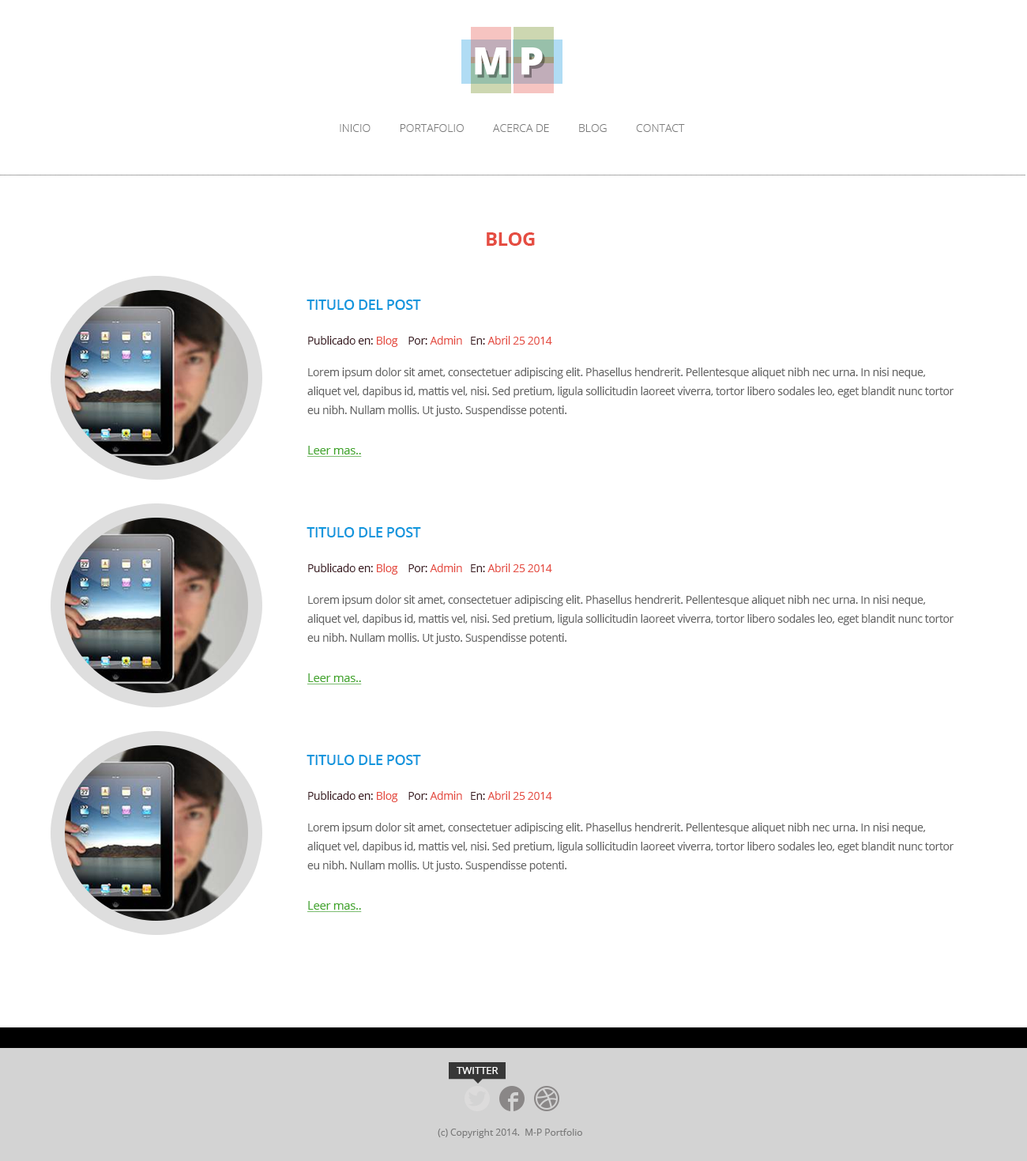
<style>
.page{position:relative;width:1027px;height:1161px;background:#ffffff}
.page>*{position:absolute;margin:0}
.t1{font:37.9px "OpenSans-Extrabold";letter-spacing:0.25em;color:#ffffff}
.t2{font:37.9px "OpenSans-Extrabold";letter-spacing:0.25em;color:#ffffff;scale:1.06 1}
.t3{font:11.1px "OpenSans-Light";color:#7a7a7a;text-transform:uppercase}
.t4{font:19px "OpenSans-Bold";letter-spacing:-0.025em;color:#e54d42;text-transform:uppercase}
.t5{font:14.2px "OpenSans-Semibold";letter-spacing:-0.025em;color:#0e96dd;text-transform:uppercase}
.t6{font:11.1px "OpenSans";letter-spacing:-0.025em;color:#3c1c22}
.t7{font:11.1px "OpenSans";letter-spacing:-0.025em;color:#e54d42}
.t8{font:11.1px/19px "OpenSans";letter-spacing:-0.025em;color:#646464}
.t9{font:11.9px "OpenSans";letter-spacing:-0.025em;color:#41a62a;text-decoration:underline}
.t10{font:10.3px "OpenSans";color:#ffffff;text-transform:uppercase}
.t11{font:9.5px "OpenSans";color:#7a7a7a}
</style>
<div class="page">
<p class="t1" style="left:475px;top:47px;width:68px;height:28px">M<span class="t2">P</span></p>
<p class="t3" style="left:340px;top:124px;width:345px;height:8px">INICIO          PortAfolio          ACERCA DE          BLOG          Contact</p>
<p class="t4" style="left:487px;top:232px;width:48px;height:14px">BLOG</p>
<p class="t5" style="left:307px;top:299px;width:114px;height:11px">TITULO DEL POST</p>
<p class="t6" style="left:308px;top:336px;width:244px;height:11px">Publicado en:<span class="t7"> Blog</span>    Por: <span class="t7">Admin</span>   En: <span class="t7">Abril 25 2014</span></p>
<p class="t8" style="left:307px;top:367px;width:648px;height:49px">Lorem ipsum dolor sit amet, consectetuer adipiscing elit. Phasellus hendrerit. Pellentesque aliquet nibh nec urna. In nisi neque, aliquet vel, dapibus id, mattis vel, nisi. Sed pretium, ligula sollicitudin laoreet viverra, tortor libero sodales leo, eget blandit nunc tortor eu nibh. Nullam mollis. Ut justo. Suspendisse potenti.</p>
<p class="t9" style="left:307px;top:446px;width:55px;height:11px">Leer mas..</p>
<p class="t5" style="left:307px;top:527px;width:114px;height:10px">TITULO DLE POST</p>
<p class="t6" style="left:308px;top:563px;width:244px;height:11px">Publicado en:<span class="t7"> Blog</span>    Por: <span class="t7">Admin</span>   En: <span class="t7">Abril 25 2014</span></p>
<p class="t8" style="left:307px;top:595px;width:648px;height:49px">Lorem ipsum dolor sit amet, consectetuer adipiscing elit. Phasellus hendrerit. Pellentesque aliquet nibh nec urna. In nisi neque, aliquet vel, dapibus id, mattis vel, nisi. Sed pretium, ligula sollicitudin laoreet viverra, tortor libero sodales leo, eget blandit nunc tortor eu nibh. Nullam mollis. Ut justo. Suspendisse potenti.</p>
<p class="t9" style="left:307px;top:673px;width:55px;height:11px">Leer mas..</p>
<p class="t5" style="left:307px;top:755px;width:114px;height:10px">TITULO DLE POST</p>
<p class="t6" style="left:308px;top:791px;width:244px;height:11px">Publicado en:<span class="t7"> Blog</span>    Por: <span class="t7">Admin</span>   En: <span class="t7">Abril 25 2014</span></p>
<p class="t8" style="left:307px;top:823px;width:648px;height:49px">Lorem ipsum dolor sit amet, consectetuer adipiscing elit. Phasellus hendrerit. Pellentesque aliquet nibh nec urna. In nisi neque, aliquet vel, dapibus id, mattis vel, nisi. Sed pretium, ligula sollicitudin laoreet viverra, tortor libero sodales leo, eget blandit nunc tortor eu nibh. Nullam mollis. Ut justo. Suspendisse potenti.</p>
<p class="t9" style="left:307px;top:901px;width:55px;height:11px">Leer mas..</p>
<p class="t10" style="left:457px;top:1067px;width:42px;height:7px">twitter</p>
<p class="t11" style="left:438px;top:1128px;width:144px;height:10px">(c) Copyright 2014.  M-P Portfolio</p>
</div>
